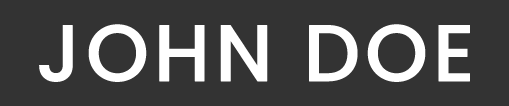
<style>
.page{position:relative;width:509px;height:106px;background:#333333}
.page>*{position:absolute;margin:0}
.t1{font:80px "Poppins-Medium";letter-spacing:0.035em;color:#ffffff;text-transform:uppercase;font-weight:bold}
</style>
<div class="page">
<p class="t1" style="left:39px;top:24px;width:431px;height:58px">JOHN DOE</p>
</div>
